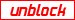
<style>
.page{position:relative;width:75px;height:20px;background:#ffffff}
.page>*{position:absolute;margin:0}
.t1{font:14px "MaassslicerItalic";color:#ff0000}
</style>
<div class="page">
<p class="t1" style="left:10px;top:4px;width:57px;height:12px">unblock</p>
</div>
